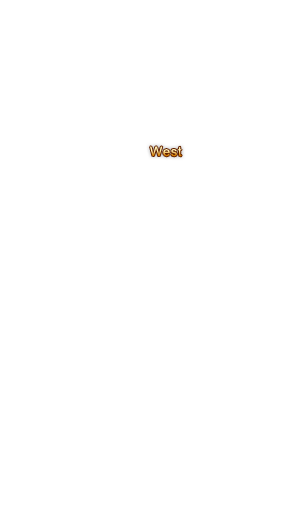
<style>
.page{position:relative;width:283px;height:513px;background:#ffffff}
.page>*{position:absolute;margin:0}
.t1{font:13px "ArialMT";letter-spacing:0.05em}
</style>
<div class="page">
<p class="t1" style="left:150px;top:146px;width:32px;height:11px">West</p>
</div>
